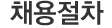
<style>
.page{position:relative;width:112px;height:28px;background:#ffffff}
.page>*{position:absolute;margin:0}
.t1{font:26.8px "KoPubDotumBold";color:#343434}
</style>
<div class="page">
<p class="t1" style="left:10px;top:0px;width:94px;height:26px">채용절차</p>
</div>
